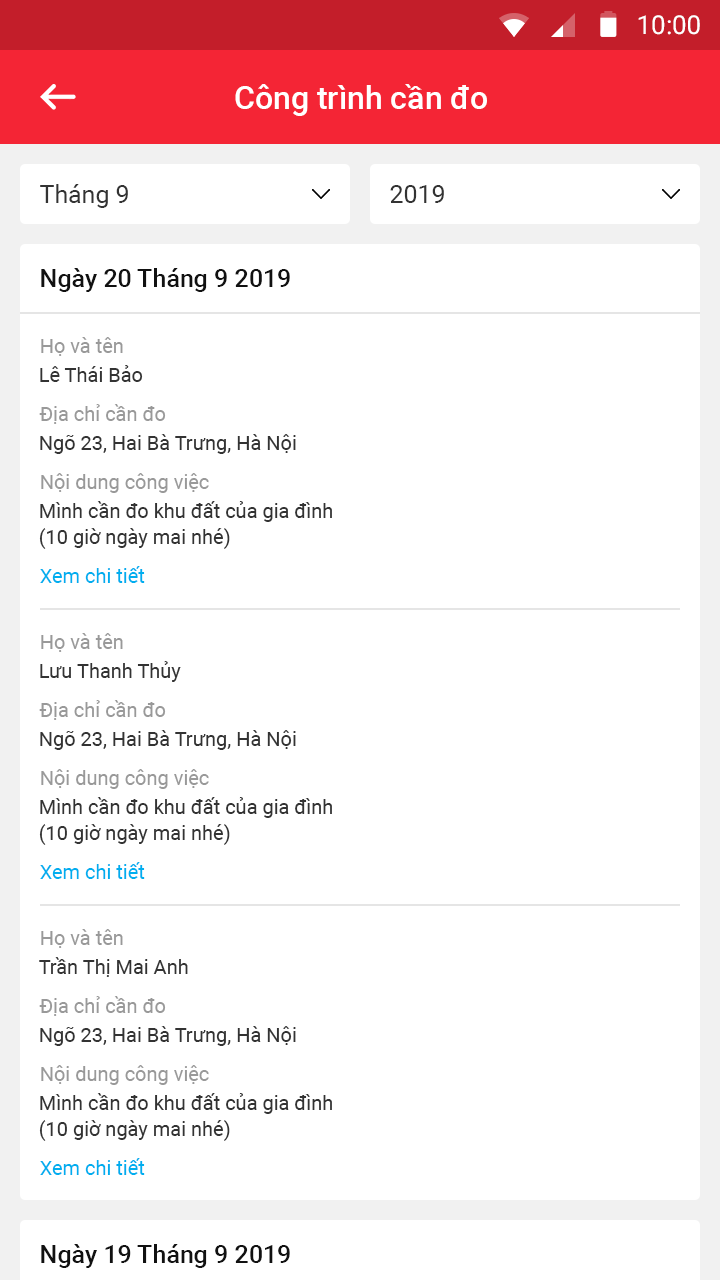
<style>
.page{position:relative;width:720px;height:1280px;background:#ffffff}
.page>*{position:absolute;margin:0}
.t1{font:26px "Roboto-Regular";color:#ffffff}
.t2{font:32px "Roboto-Medium";color:#ffffff}
.t3{font:25px "Roboto-Regular";color:#333333}
.t4{font:25px "Roboto-Medium";color:#111111}
.t5{font:20px/68px "Roboto-Regular";color:#999999}
.t6{font:20px/68px "Roboto-Regular";color:#333333}
.t7{font:20px/26px "Roboto-Regular";color:#333333}
.t8{font:20px "Roboto-Regular";color:#00aeef}
</style>
<div class="page">
<p class="t1" style="left:638px;top:15px;width:62px;height:20px">10:00</p>
<p class="t2" style="left:235px;top:84px;width:252px;height:32px">Công trình cần đo</p>
<p class="t3" style="left:40px;top:184px;width:88px;height:24px">Tháng 9</p>
<p class="t3" style="left:390px;top:185px;width:54px;height:18px">2019</p>
<p class="t4" style="left:41px;top:268px;width:249px;height:24px">Ngày 20 Tháng 9 2019</p>
<p class="t5" style="left:39px;top:337px;width:170px;height:156px">Họ và tên<br>Địa chỉ cần đo<br>Nội dung công việc</p>
<p class="t6" style="left:39px;top:365px;width:293px;height:184px">Lê Thái Bảo<br>Ngõ 23, Hai Bà Trưng, Hà Nội<br>Mình cần đo khu đất của gia đình<br><span class="t7">(10 giờ ngày mai nhé)</span></p>
<p class="t8" style="left:40px;top:566px;width:105px;height:17px">Xem chi tiết</p>
<p class="t5" style="left:39px;top:633px;width:170px;height:156px">Họ và tên<br>Địa chỉ cần đo<br>Nội dung công việc</p>
<p class="t6" style="left:39px;top:661px;width:293px;height:184px">Lưu Thanh Thủy<br>Ngõ 23, Hai Bà Trưng, Hà Nội<br>Mình cần đo khu đất của gia đình<br><span class="t7">(10 giờ ngày mai nhé)</span></p>
<p class="t8" style="left:40px;top:862px;width:105px;height:17px">Xem chi tiết</p>
<p class="t5" style="left:39px;top:929px;width:170px;height:156px">Họ và tên<br>Địa chỉ cần đo<br>Nội dung công việc</p>
<p class="t6" style="left:39px;top:957px;width:293px;height:184px">Trần Thị Mai Anh<br>Ngõ 23, Hai Bà Trưng, Hà Nội<br>Mình cần đo khu đất của gia đình<br><span class="t7">(10 giờ ngày mai nhé)</span></p>
<p class="t8" style="left:40px;top:1158px;width:105px;height:17px">Xem chi tiết</p>
<p class="t4" style="left:41px;top:1244px;width:249px;height:24px">Ngày 19 Tháng 9 2019</p>
</div>
